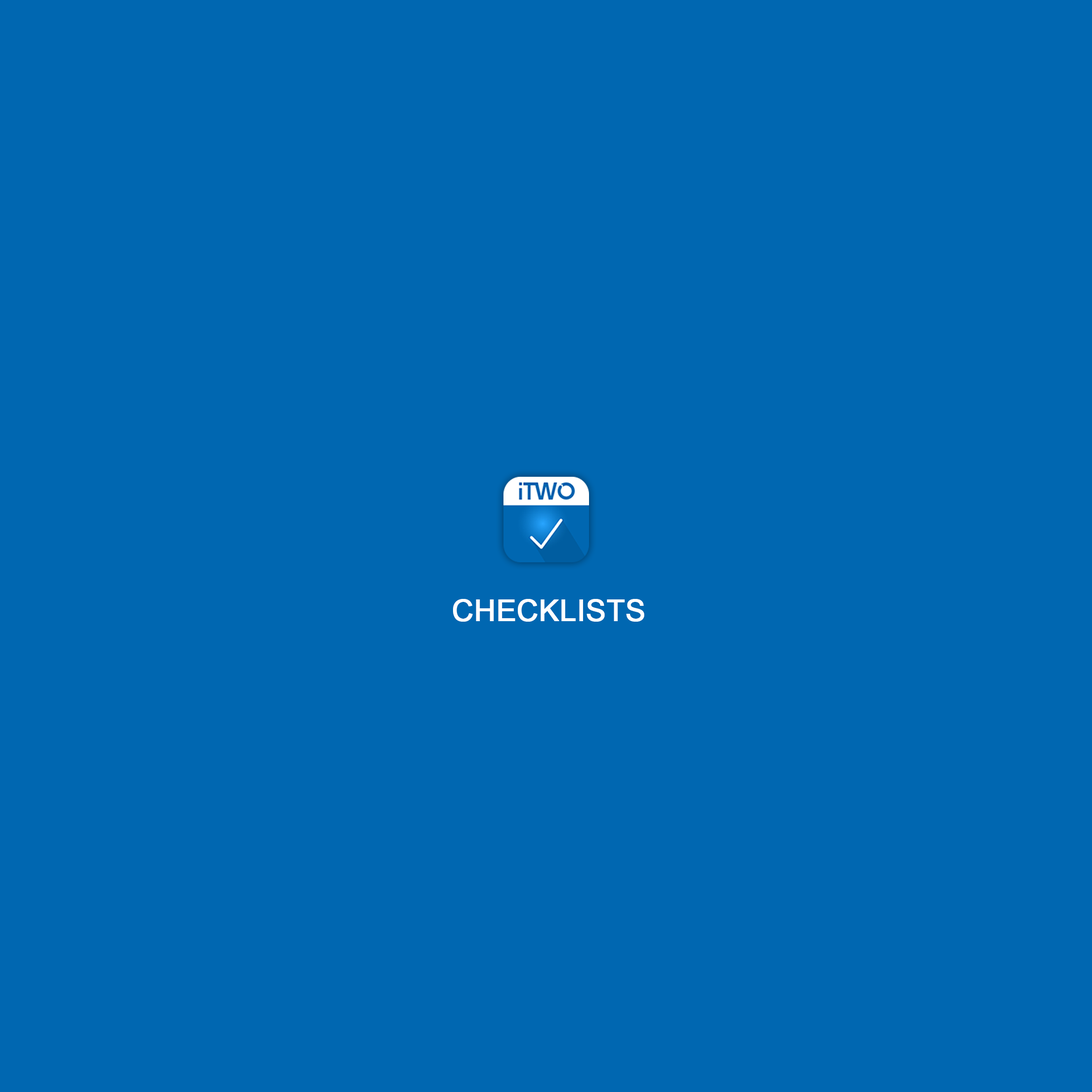
<style>
.page{position:relative;width:1092px;height:1092px;background:#0067b1}
.page>*{position:absolute;margin:0}
.t1{font:29.7px "ArialMT";color:#ffffff;font-weight:bold}
</style>
<div class="page">
<p class="t1" style="left:453px;top:599px;width:191px;height:23px">CHECKLISTS</p>
</div>
